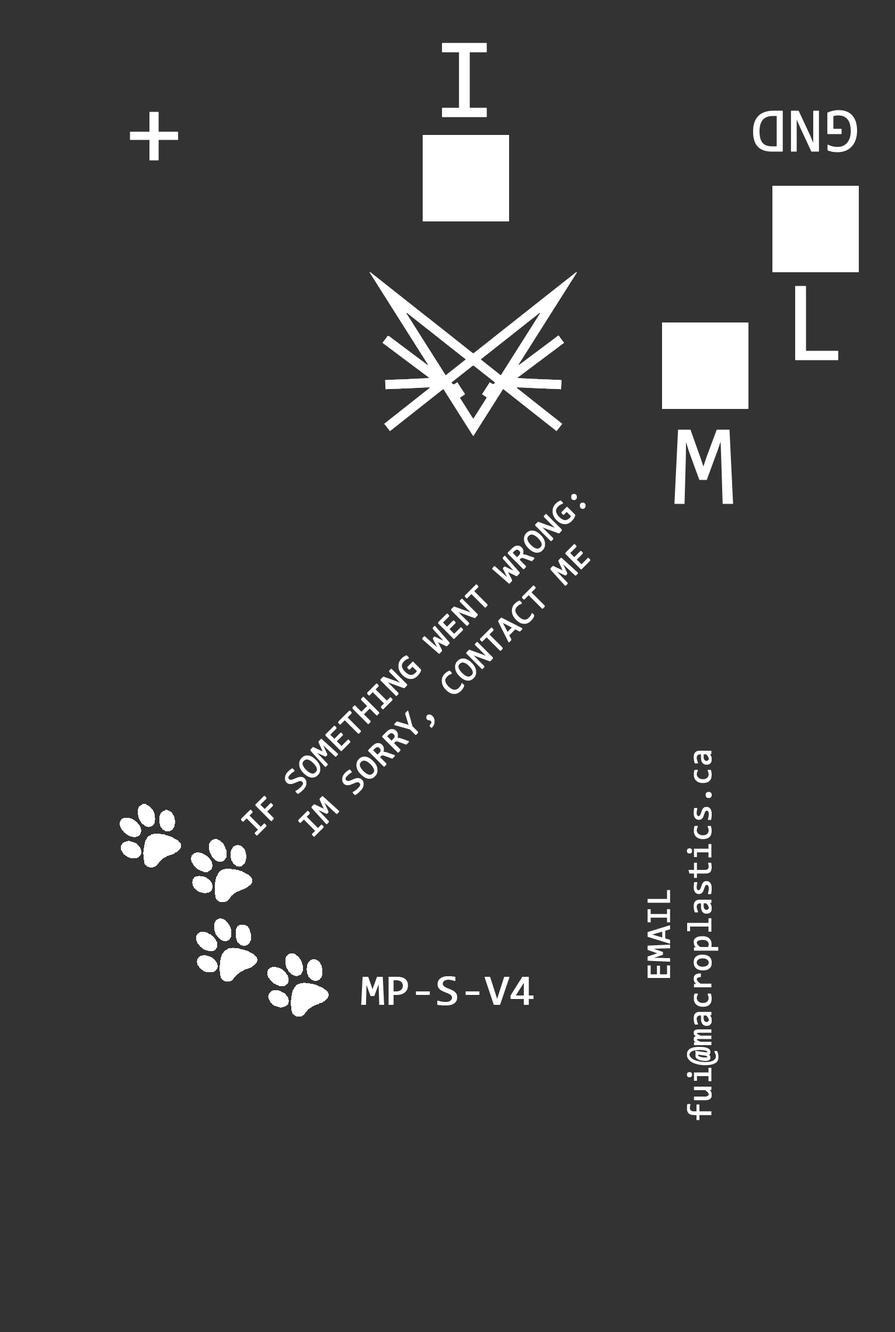
<style>
.page{position:relative;width:895px;height:1332px;background:#333333}
.page>*{position:absolute;margin:0}
.t1{font:115.8px "Consolas";color:#ffffff;font-weight:bold}
.t2{font:101.4px "Consolas";color:#ffffff;font-weight:bold}
.t3{font:63.3px "Consolas";color:#ffffff;font-weight:bold}
.t4{font:34.4px "Consolas";color:#ffffff;font-weight:bold}
.t5{font:34.4px "Consolas";color:#ffffff;font-weight:bold;scale:0.94 1}
.t6{font:43.2px "Consolas";color:#ffffff;font-weight:bold}
</style>
<div class="page">
<p class="t1" style="left:442px;top:43px;width:45px;height:74px">I</p>
<p class="t2" style="left:130px;top:112px;width:49px;height:49px">+</p>
<p class="t3" style="left:753px;top:110px;width:105px;height:42px;rotate:180deg">GND</p>
<p class="t1" style="left:796px;top:286px;width:43px;height:74px">L</p>
<p class="t1" style="left:675px;top:429px;width:59px;height:75px">M</p>
<p class="t4" style="left:241px;top:494px;width:350px;height:343px;text-align:center;rotate:-45deg">IF SOMETHING WENT WRONG:<br>IM SORRY, CONTACT ME</p>
<p class="t5" style="left:648px;top:751px;width:71px;height:369px;text-align:center;rotate:-90deg">EMAIL<br>fui@macroplastics.ca</p>
<p class="t6" style="left:361px;top:976px;width:173px;height:29px">MP-S-V4</p>
</div>
